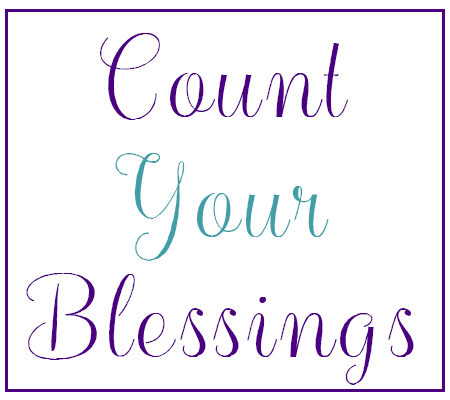
<style>
.page{position:relative;width:450px;height:400px;background:#ffffff}
.page>*{position:absolute;margin:0}
.t1{font:100px "Balqis";letter-spacing:0.05em;color:#4b0082}
.t2{font:100px "Balqis";letter-spacing:0.05em;color:#429ea6}
</style>
<div class="page">
<p class="t1" style="left:26px;top:33px;width:388px;height:352px;text-align:center">Count<br><span class="t2">Your<br></span>Blessings</p>
</div>
